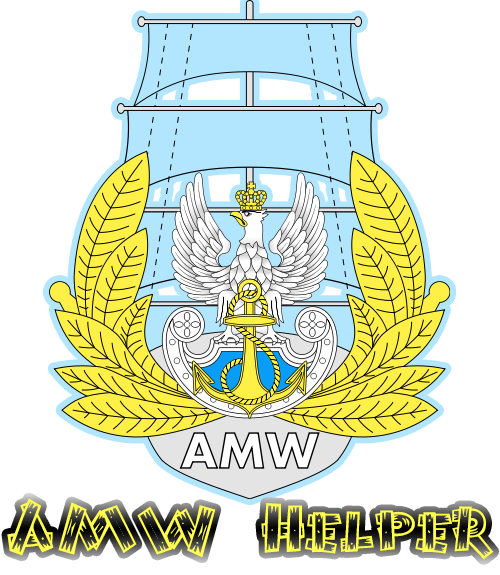
<style>
.page{position:relative;width:500px;height:575px;background:#ffffff}
.page>*{position:absolute;margin:0}
.t1{font:80px "BurnstownDam-Regular";color:#ffff4c}
</style>
<div class="page">
<p class="t1" style="left:7px;top:498px;width:487px;height:61px">AMW  Helper</p>
</div>
